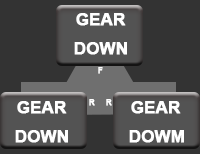
<style>
.page{position:relative;width:200px;height:154px;background:#333333}
.page>*{position:absolute;margin:0}
.t1{font:16.7px "Arial-BoldMT";color:#ffffff;font-weight:bold}
.t2{font:8.3px "Arial-BoldMT";color:#ffffff;font-weight:bold}
</style>
<div class="page">
<p class="t1" style="left:74px;top:13px;width:53px;height:42px">GEAR DOWN</p>
<p class="t2" style="left:98px;top:67px;width:5px;height:7px">F</p>
<p class="t1" style="left:15px;top:101px;width:53px;height:42px">GEAR DOWN</p>
<p class="t2" style="left:89px;top:99px;width:6px;height:7px">R</p>
<p class="t2" style="left:106px;top:99px;width:6px;height:7px">R</p>
<p class="t1" style="left:129px;top:101px;width:55px;height:42px">GEAR DOWM</p>
</div>
